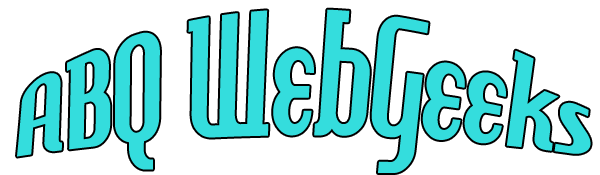
<style>
.page{position:relative;width:600px;height:175px;background:#ffffff}
.page>*{position:absolute;margin:0}
.t1{font:86.5px/415.3px "HamburgerHeaven";letter-spacing:0.01em;color:#34dddd;scale:1.26 1}
</style>
<div class="page">
<p class="t1" style="left:17px;top:9px;width:574px;height:164px;text-align:center">ABQ WebGeeks</p>
</div>
